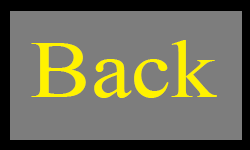
<style>
.page{position:relative;width:250px;height:150px;background:#7d7d7d}
.page>*{position:absolute;margin:0}
.t1{font:82px "TimesNewRomanPSMT";color:#fff200;scale:1.1 1}
</style>
<div class="page">
<p class="t1" style="left:31px;top:40px;width:186px;height:58px">Back</p>
</div>
